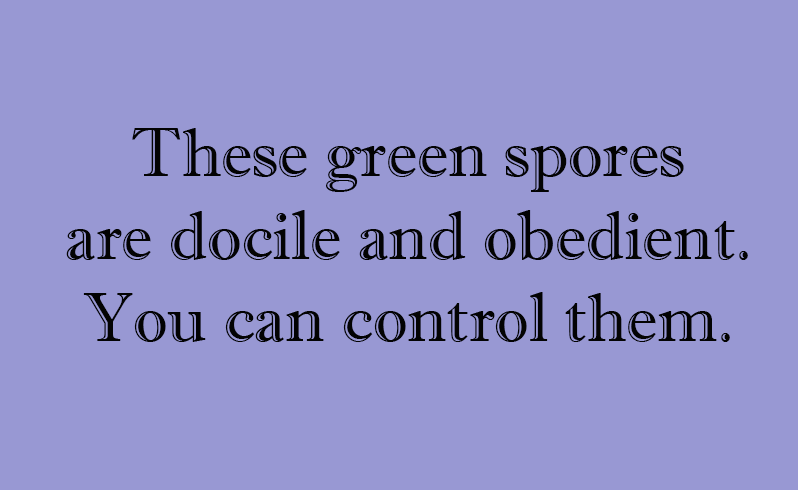
<style>
.page{position:relative;width:798px;height:490px;background:#9898d3}
.page>*{position:absolute;margin:0}
.t1{font:68.7px "ImprintMT-Shadow";color:#030303}
</style>
<div class="page">
<p class="t1" style="left:66px;top:128px;width:682px;height:214px;text-align:center">These green spores<br>are docile and obedient.<br>You can control them.</p>
</div>
